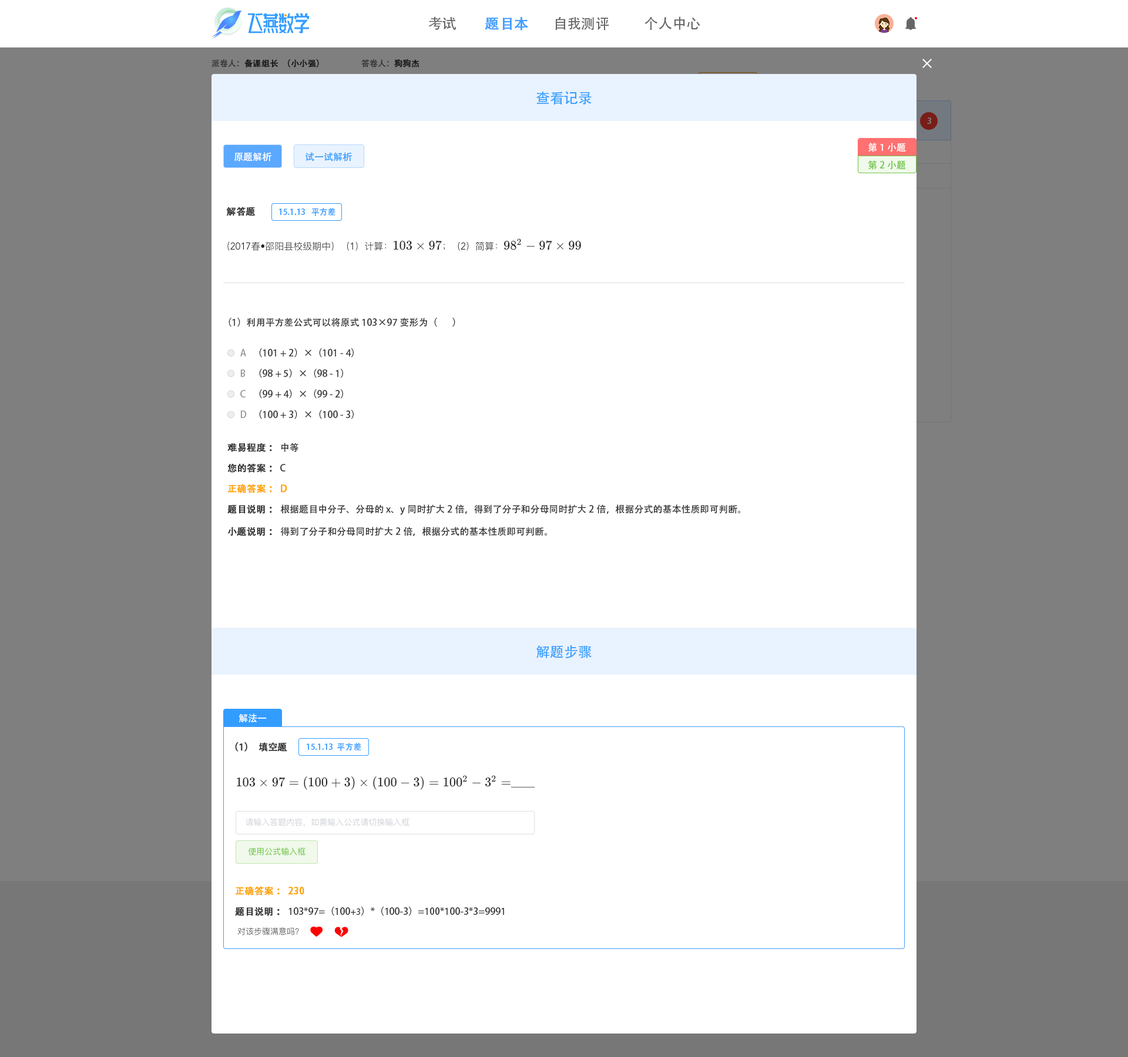
<style>
.page{position:relative;width:1128px;height:1057px;background:#ffffff}
.page>*{position:absolute;margin:0}
.t1{font:14.1px "AdobeHeitiStd-Regular";color:#666666}
.t2{font:14.1px "AdobeHeitiStd-Regular";color:#409eff;font-weight:bold}
.t3{font:8.2px "AdobeHeitiStd-Regular";color:#191919;font-weight:bold}
.t4{font:8.2px "AdobeHeitiStd-Regular";color:#191919}
.t5{font:8.2px "AdobeHeitiStd-Regular"}
.t6{font:8.2px "AdobeHeitiStd-Regular";font-weight:bold}
.t7{font:14.1px "AdobeHeitiStd-Regular";color:#339dff}
.t8{font:8.2px "AdobeHeitiStd-Regular";color:#7f7f7f}
.t9{font:9.4px "AdobeHeitiStd-Regular";color:#ffffff}
.t10{font:9.4px "AdobeHeitiStd-Regular";color:#339dff}
.t11{font:9.4px "AdobeHeitiStd-Regular";color:#6ec544}
.t12{font:9.4px "AdobeHeitiStd-Regular";color:#333333;font-weight:bold}
.t13{font:8.2px "AdobeHeitiStd-Regular";color:#339dff}
.t14{font:9.4px "AdobeHeitiStd-Regular";color:#333333}
.t15{font:9.4px "AdobeHeitiStd-Regular";color:#999999}
.t16{font:9.4px "AdobeHeitiStd-Regular";color:#fea300;font-weight:bold}
.t17{font:9.4px "MyriadPro-Regular";color:#333333}
</style>
<div class="page">
<p class="t1" style="left:428px;top:16px;width:28px;height:14px">考试</p>
<p class="t2" style="left:485px;top:17px;width:43px;height:14px">题目本</p>
<p class="t1" style="left:555px;top:16px;width:54px;height:15px">自我测评</p>
<p class="t1" style="left:644px;top:16px;width:56px;height:14px">个人中心</p>
<p class="t3" style="left:211px;top:59px;width:108px;height:9px"><span class="t4">派卷人：</span>备课组长（小小强）</p>
<p class="t5" style="left:361px;top:59px;width:58px;height:9px">答卷人：<span class="t6">狗狗杰</span></p>
<p class="t7" style="left:536px;top:91px;width:56px;height:14px">查看记录</p>
<p class="t8" style="left:927px;top:117px;width:4px;height:7px">3</p>
<p class="t9" style="left:868px;top:143px;width:38px;height:9px">第1小题</p>
<p class="t9" style="left:234px;top:152px;width:37px;height:10px">原题解析</p>
<p class="t10" style="left:305px;top:152px;width:47px;height:10px">试一试解析</p>
<p class="t11" style="left:868px;top:160px;width:37px;height:10px">第2小题</p>
<p class="t12" style="left:226px;top:207px;width:30px;height:9px">解答题</p>
<p class="t13" style="left:279px;top:208px;width:56px;height:8px">15.1.13   平方差</p>
<p class="t14" style="left:228px;top:318px;width:227px;height:9px">（1）利用平方差公式可以将原式103×97变形为（       ）</p>
<p class="t15" style="left:240px;top:349px;width:6px;height:8px">A</p>
<p class="t14" style="left:259px;top:348px;width:95px;height:10px">（101 + 2）×（101 - 4）</p>
<p class="t15" style="left:240px;top:369px;width:6px;height:8px">B</p>
<p class="t14" style="left:259px;top:369px;width:84px;height:9px">（98 + 5）×（98 - 1）</p>
<p class="t14" style="left:259px;top:389px;width:84px;height:10px">（99 + 4）×（99 - 2）</p>
<p class="t15" style="left:240px;top:390px;width:6px;height:8px">C</p>
<p class="t15" style="left:240px;top:411px;width:7px;height:7px">D</p>
<p class="t14" style="left:259px;top:410px;width:95px;height:9px">（100 + 3）×（100 - 3）</p>
<p class="t12" style="left:227px;top:443px;width:71px;height:9px">难易程度：<span class="t14"> 中等</span></p>
<p class="t12" style="left:227px;top:463px;width:58px;height:10px">您的答案：<span class="t14"> C</span></p>
<p class="t16" style="left:228px;top:484px;width:59px;height:9px">正确答案： D</p>
<p class="t14" style="left:227px;top:505px;width:513px;height:10px"><span class="t12">题目说明： </span>根据题目中分子、分母的x、y同时扩大2倍，得到了分子和分母同时扩大2倍，根据分式的基本性质即可判断。</p>
<p class="t14" style="left:228px;top:527px;width:319px;height:9px"><span class="t12">小题说明：</span>得到了分子和分母同时扩大2倍，根据分式的基本性质即可判断。</p>
<p class="t7" style="left:536px;top:646px;width:56px;height:12px">解题步骤</p>
<p class="t9" style="left:238px;top:714px;width:28px;height:9px">解法一</p>
<p class="t12" style="left:235px;top:742px;width:52px;height:10px">（1）填空题</p>
<p class="t13" style="left:307px;top:743px;width:54px;height:8px">15.1.13  平方差</p>
<p class="t16" style="left:236px;top:886px;width:68px;height:10px">正确答案： 230</p>
<p class="t14" style="left:235px;top:907px;width:269px;height:9px"><span class="t12">题目说明：</span>103*97=（100<span class="t17">+3</span>）*（100-3）=100*100-3*3=9991</p>
</div>
